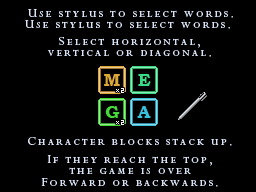
<style>
.page{position:relative;width:256px;height:192px;background:#000000}
.page>*{position:absolute;margin:0}
.t1{font:14px "Perpetua-SC";letter-spacing:0.14em;color:#dae4f7}
.t2{font:14px/11px "Perpetua-SC";letter-spacing:0.14em;color:#dae4f7}
</style>
<div class="page">
<p class="t1" style="left:28px;top:9px;width:205px;height:9px">Use stylus to select words.</p>
<p class="t1" style="left:25px;top:20px;width:205px;height:9px">Use stylus to select words.</p>
<p class="t2" style="left:47px;top:37px;width:164px;height:20px;text-align:center">Select horizontal,<br>vertical or diagonal.</p>
<p class="t1" style="left:28px;top:137px;width:204px;height:9px">Character blocks stack up.</p>
<p class="t2" style="left:47px;top:155px;width:165px;height:19px;text-align:center">If they reach the top,<br>the game is over</p>
<p class="t1" style="left:41px;top:178px;width:177px;height:9px">Forward or backwards.</p>
</div>
